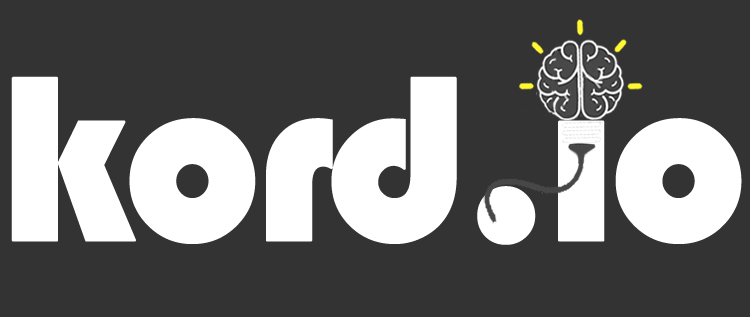
<style>
.page{position:relative;width:750px;height:317px;background:#333333}
.page>*{position:absolute;margin:0}
.t1{font:244.4px "Bauhaus93";letter-spacing:-0.05em;color:#ffffff;font-weight:bold}
</style>
<div class="page">
<p class="t1" style="left:11px;top:67px;width:731px;height:178px">kord.io</p>
</div>
